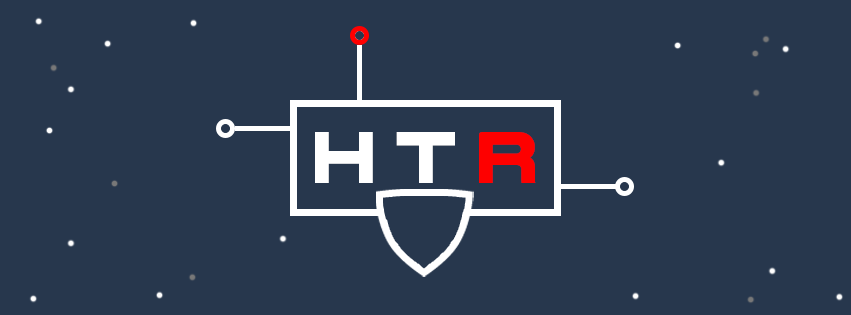
<style>
.page{position:relative;width:851px;height:315px;background:#27374d}
.page>*{position:absolute;margin:0}
.t1{font:75px "NulshockRg-Bold";letter-spacing:0.25em;color:#ffffff;text-transform:uppercase}
.t2{font:75px "NulshockRg-Bold";letter-spacing:0.25em;color:#fe0000;text-transform:uppercase}
</style>
<div class="page">
<p class="t1" style="left:315px;top:132px;width:221px;height:51px">HT<span class="t2">R</span></p>
</div>
